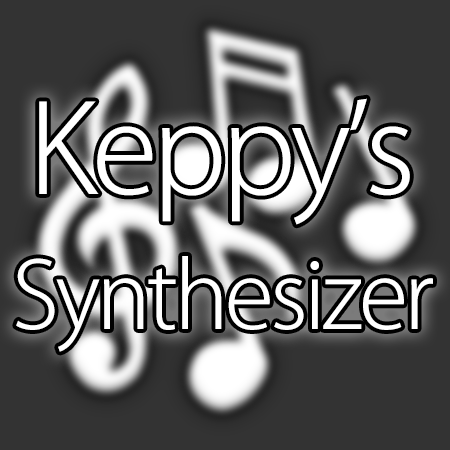
<style>
.page{position:relative;width:450px;height:450px;background:#333333}
.page>*{position:absolute;margin:0}
.t1{font:121.9px "KozGoPr6N-Light";letter-spacing:-0.044em;color:#ffffff}
.t2{font:91.4px "KozGoPr6N-Light";letter-spacing:-0.044em;color:#ffffff}
</style>
<div class="page">
<p class="t1" style="left:39px;top:98px;width:371px;height:127px">Keppy’s</p>
<p class="t2" style="left:16px;top:256px;width:417px;height:96px">Synthesizer</p>
</div>
